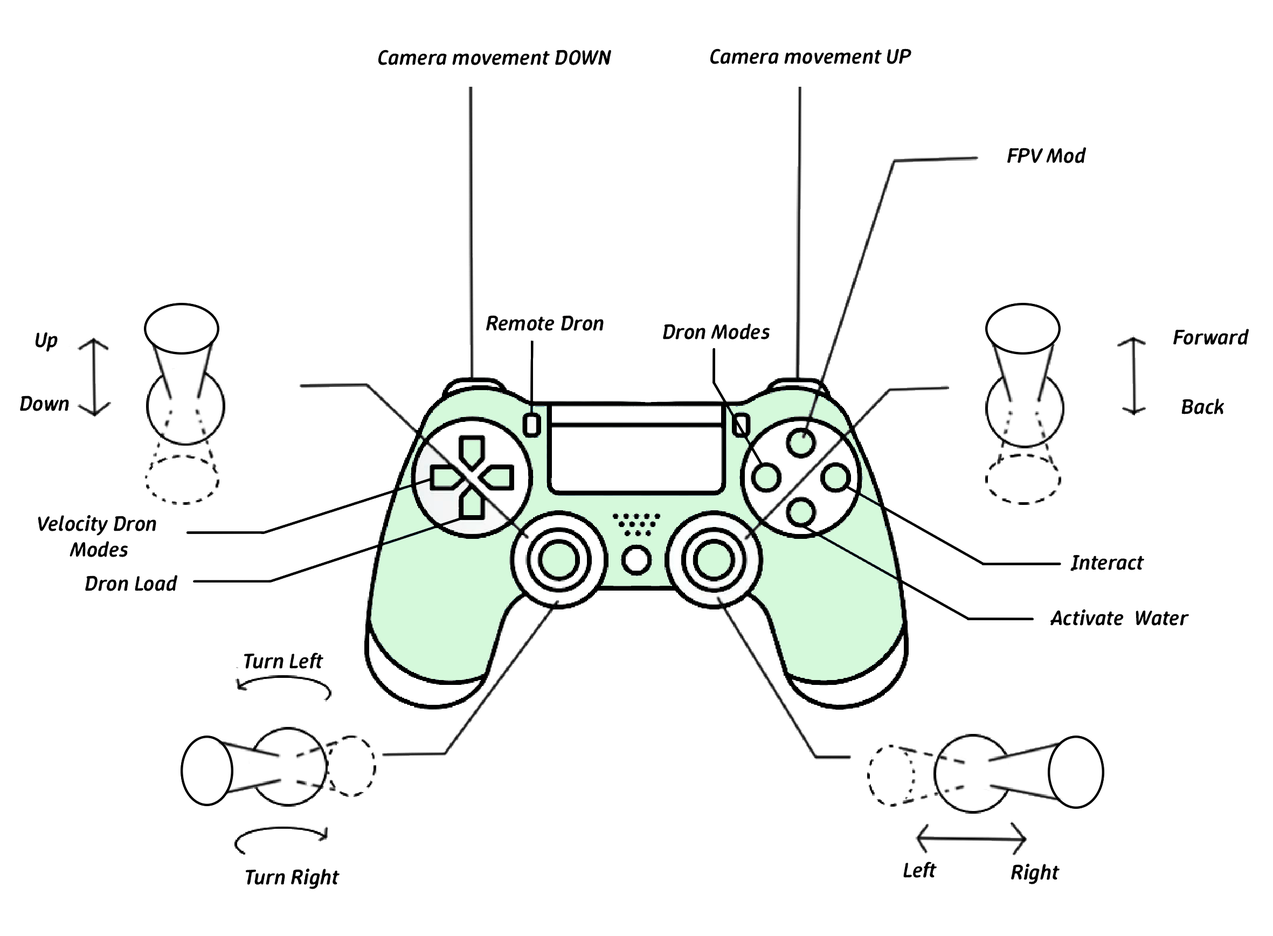
<style>
.page{position:relative;width:1273px;height:936px;background:#ffffff}
.page>*{position:absolute;margin:0}
.t1{font:21.6px "WinkyRough-Medium";color:#000000;font-style:italic}
</style>
<div class="page">
<p class="t1" style="left:378px;top:50px;width:233px;height:15px">Camera movement DOWN</p>
<p class="t1" style="left:710px;top:49px;width:202px;height:15px">Camera movement UP</p>
<p class="t1" style="left:1008px;top:147px;width:79px;height:16px">FPV Mod</p>
<p class="t1" style="left:486px;top:315px;width:118px;height:16px">Remote Dron</p>
<p class="t1" style="left:663px;top:323px;width:107px;height:17px">Dron Modes</p>
<p class="t1" style="left:1174px;top:329px;width:76px;height:16px">Forward</p>
<p class="t1" style="left:35px;top:332px;width:23px;height:20px">Up</p>
<p class="t1" style="left:20px;top:396px;width:49px;height:15px">Down</p>
<p class="t1" style="left:1182px;top:398px;width:43px;height:17px">Back</p>
<p class="t1" style="left:38px;top:515px;width:118px;height:42px;text-align:center">Velocity Dron <br>Modes</p>
<p class="t1" style="left:1071px;top:555px;width:74px;height:15px">Interact</p>
<p class="t1" style="left:85px;top:575px;width:93px;height:16px">Dron Load</p>
<p class="t1" style="left:1051px;top:609px;width:139px;height:17px">Activate  Water</p>
<p class="t1" style="left:244px;top:653px;width:79px;height:16px">Turn Left</p>
<p class="t1" style="left:246px;top:869px;width:94px;height:21px">Turn Right</p>
<p class="t1" style="left:904px;top:862px;width:33px;height:16px">Left</p>
<p class="t1" style="left:1011px;top:864px;width:49px;height:21px">Right</p>
</div>
